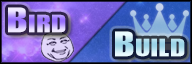
<style>
.page{position:relative;width:192px;height:64px}
.page>*{position:absolute;margin:0}
.t1{font:34.2px "GENUINE";letter-spacing:0.04em;font-variant:small-caps;scale:1.26 1}
</style>
<div class="page">
<p class="t1" style="left:8px;top:7px;width:58px;height:26px">Bird</p>
<p class="t1" style="left:115px;top:31px;width:70px;height:26px">Build</p>
</div>
